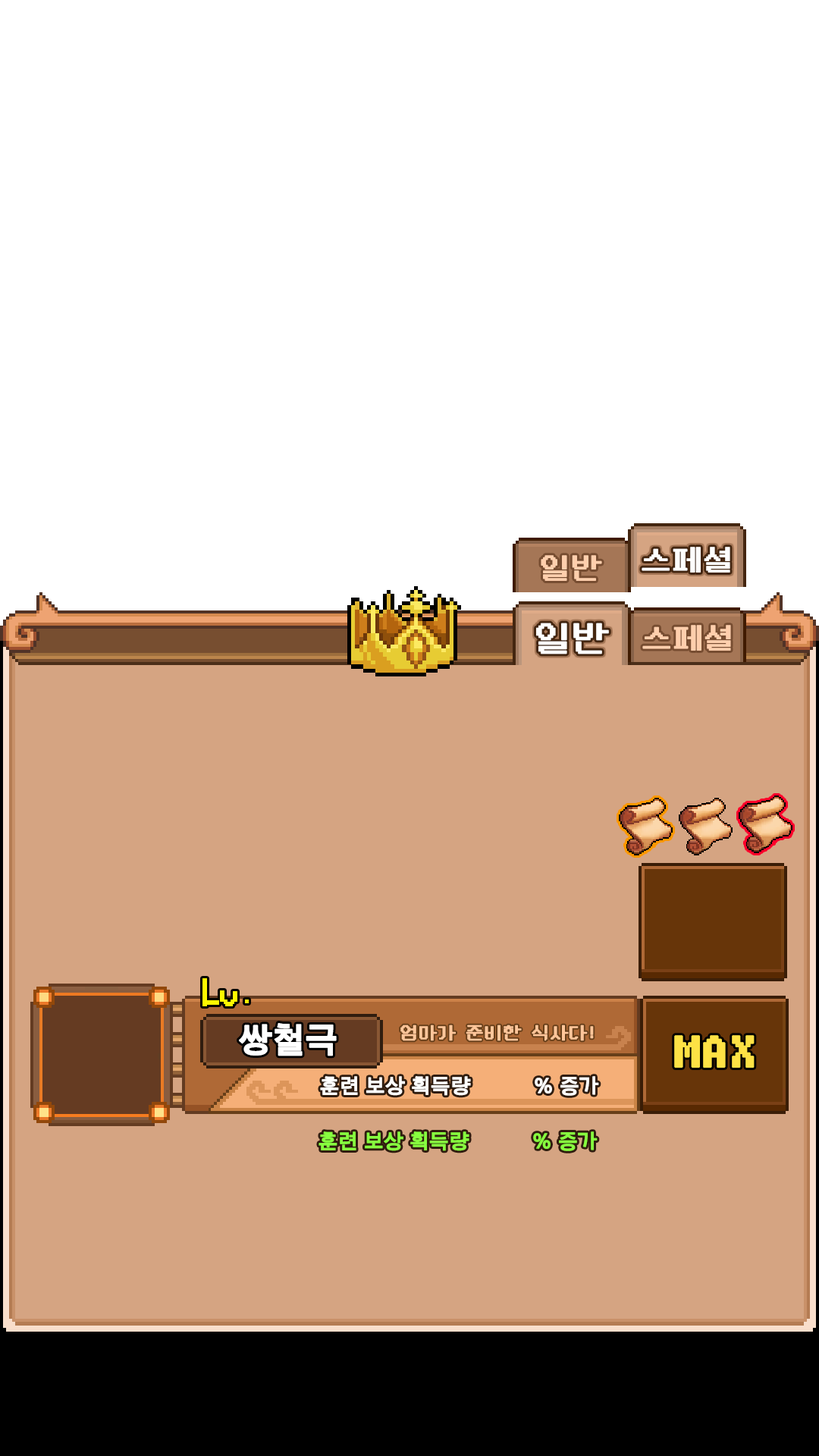
<style>
.page{position:relative;width:819px;height:1456px;background:#ffffff}
.page>*{position:absolute;margin:0}
.t1{font:34.9px "Arita-dotum-Bold_OTF";color:#ffffff;font-weight:bold}
.t2{font:18.2px "NeoDunggeunmo-Regular";color:#ffc69a;font-weight:bold}
.t3{font:20.9px "Arita-dotum-SemiBold_OTF";color:#ffffff;font-weight:bold}
.t4{font:20.9px "Arita-dotum-SemiBold_OTF";color:#87ff3f;font-weight:bold}
</style>
<div class="page">
<p class="t1" style="left:239px;top:1023px;width:98px;height:33px">쌍철극</p>
<p class="t2" style="left:400px;top:1024px;width:194px;height:17px">엄마가 준비한 식사다!</p>
<p class="t3" style="left:320px;top:1076px;width:279px;height:20px">훈련 보상 획득량          % 증가</p>
<p class="t4" style="left:318px;top:1131px;width:280px;height:20px">훈련 보상 획득량          % 증가</p>
</div>
